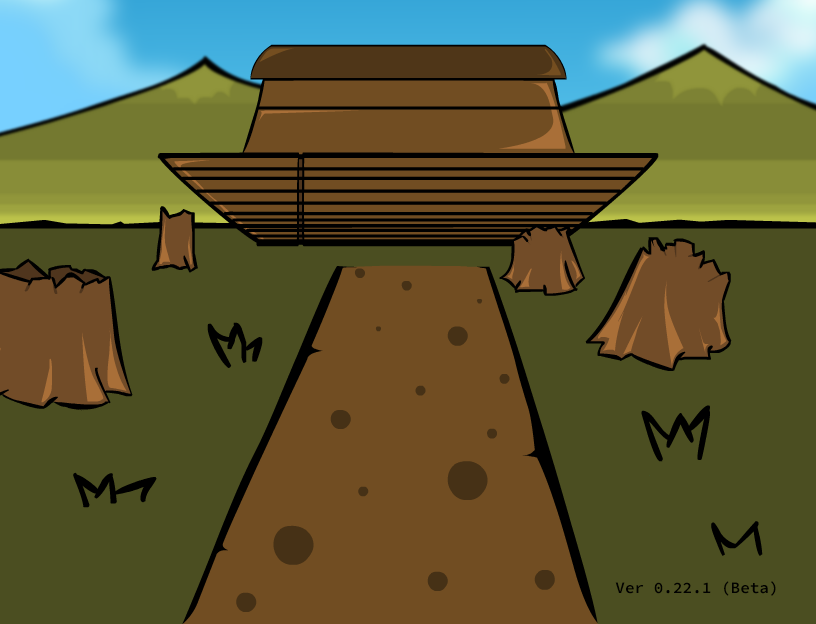
<style>
.page{position:relative;width:816px;height:624px;background:#4b4e21}
.page>*{position:absolute;margin:0}
.t1{font:16px "SourceCodePro-Semibold";color:#010101}
</style>
<div class="page">
<p class="t1" style="left:615px;top:581px;width:161px;height:15px">Ver 0.22.1 (Beta)</p>
</div>
